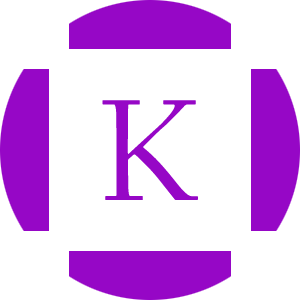
<style>
.page{position:relative;width:300px;height:300px;background:#ffffff}
.page>*{position:absolute;margin:0}
.t1{font:150px "CalifornianFB-Reg";color:#9607c6}
</style>
<div class="page">
<p class="t1" style="left:102px;top:100px;width:96px;height:100px">K</p>
</div>
